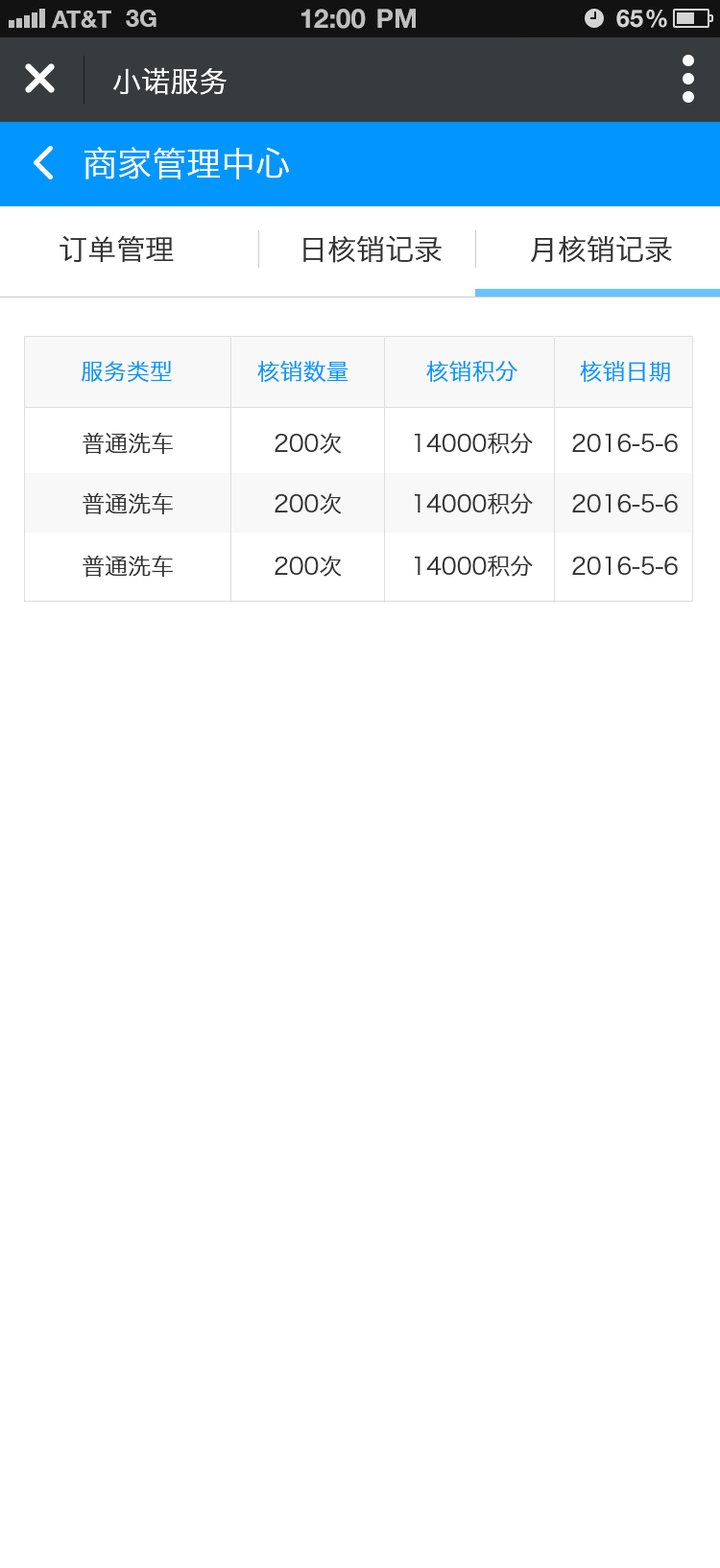
<style>
.page{position:relative;width:720px;height:1568px;background:#ffffff}
.page>*{position:absolute;margin:0}
.t1{font:28.8px "HiraginoSansGB-W3";color:#ffffff}
.t2{font:34.5px "HiraginoSansGB-W3";color:#ffffff}
.t3{font:28.8px "HiraginoSansGB-W3";color:#333333}
.t4{font:23px "HiraginoSansGB-W3";color:#0096fd}
.t5{font:23px "HiraginoSansGB-W3";color:#333333}
</style>
<div class="page">
<p class="t1" style="left:113px;top:67px;width:113px;height:28px">小诺服务</p>
<p class="t2" style="left:84px;top:147px;width:206px;height:32px">商家管理中心</p>
<p class="t3" style="left:59px;top:235px;width:613px;height:28px">订单管理             日核销记录         月核销记录</p>
<p class="t4" style="left:82px;top:360px;width:588px;height:22px">服务类型           核销数量          核销积分        核销日期</p>
<p class="t5" style="left:83px;top:432px;width:594px;height:22px">普通洗车             200次         14000积分     2016-5-6</p>
<p class="t5" style="left:83px;top:492px;width:594px;height:22px">普通洗车             200次         14000积分     2016-5-6</p>
<p class="t5" style="left:83px;top:555px;width:594px;height:22px">普通洗车             200次         14000积分     2016-5-6</p>
</div>
